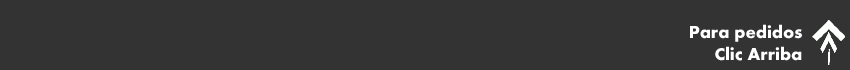
<style>
.page{position:relative;width:850px;height:70px;background:#333333}
.page>*{position:absolute;margin:0}
.t1{font:18px "Futura-Bold";color:#ffffff}
</style>
<div class="page">
<p class="t1" style="left:690px;top:24px;width:112px;height:37px;text-align:right">Para pedidos<br>Clic Arriba</p>
</div>
